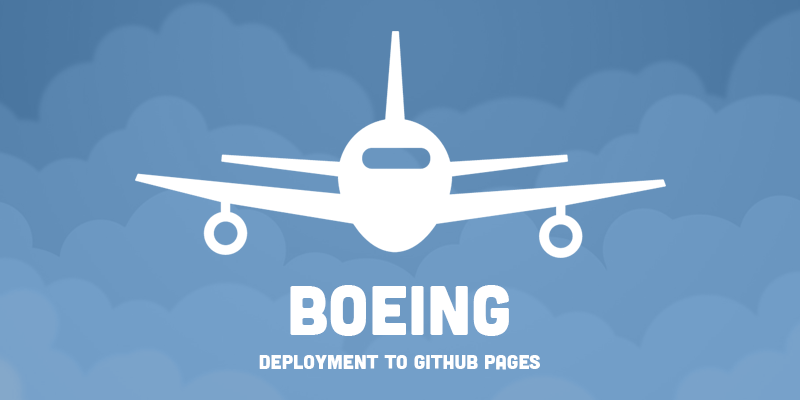
<style>
.page{position:relative;width:800px;height:400px}
.page>*{position:absolute;margin:0}
.t1{font:70px "Cubano-Regular";color:#ffffff;text-transform:uppercase}
.t2{font:20px "Cubano-Regular";color:#ffffff;text-transform:uppercase}
</style>
<div class="page">
<p class="t1" style="left:290px;top:285px;width:219px;height:51px">Boeing</p>
<p class="t2" style="left:259px;top:355px;width:281px;height:15px">Deployment to GitHub Pages</p>
</div>
